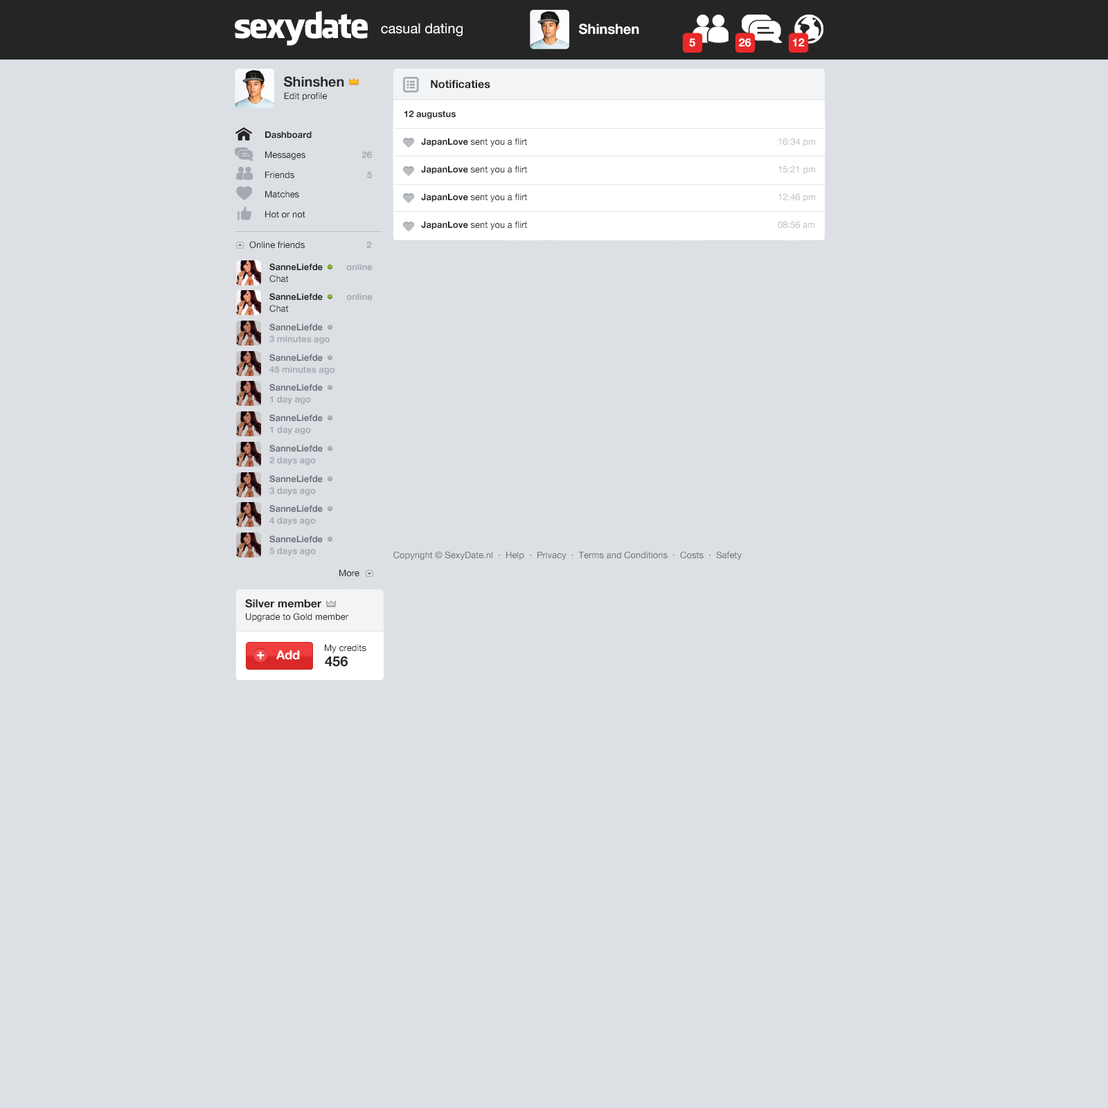
<style>
.page{position:relative;width:1108px;height:1108px;background:#dcdfe3}
.page>*{position:absolute;margin:0}
.t1{font:34.6px "FacebookLetterFaces";letter-spacing:-0.05em;color:#ffffff}
.t2{font:13.8px "HelveticaNeue";color:#ffffff}
.t3{font:13.8px "HelveticaNeue-Bold";color:#ffffff}
.t4{font:11.1px "HelveticaNeue-Bold";color:#ffffff}
.t5{font:13.8px "HelveticaNeue-Bold";color:#252525}
.t6{font:11.1px "HelveticaNeue-Bold";color:#252525}
.t7{font:9px "HelveticaNeue";color:#252525}
.t8{font:9px/13.8px "HelveticaNeue-Bold";color:#252525}
.t9{font:9px/13.8px "HelveticaNeue";color:#252525}
.t10{font:9px/13.8px "HelveticaNeue";color:#bbbec1}
.t11{font:9px/20px "HelveticaNeue";color:#252525}
.t12{font:9px/20px "HelveticaNeue-Bold";color:#252525}
.t13{font:9px/20px "HelveticaNeue-Bold";color:#a5aab2}
.t14{font:9px "HelveticaNeue-Bold";color:#a5aab2}
.t15{font:9px/11.8px "HelveticaNeue-Bold";color:#252525}
.t16{font:9px/11.8px "HelveticaNeue-Bold";color:#a5aab2}
.t17{font:9px/11.8px "HelveticaNeue";color:#252525}
.t18{font:9px/11.8px "HelveticaNeue-Bold";color:#6d727b}
.t19{font:9px "HelveticaNeue";color:#707070}
.t20{font:13.2px "HelveticaNeue-Bold";color:#ffffff;font-weight:bold}
.t21{font:12.5px "HelveticaNeue-Bold";color:#ffffff}
</style>
<div class="page">
<p class="t1" style="left:235px;top:11px;width:133px;height:35px">sexydate</p>
<p class="t2" style="left:381px;top:23px;width:81px;height:14px">casual dating</p>
<p class="t3" style="left:579px;top:24px;width:60px;height:11px">Shinshen</p>
<p class="t4" style="left:689px;top:38px;width:6px;height:9px">5</p>
<p class="t4" style="left:739px;top:38px;width:12px;height:9px">26</p>
<p class="t4" style="left:793px;top:38px;width:11px;height:8px">12</p>
<p class="t5" style="left:284px;top:76px;width:60px;height:11px">Shinshen</p>
<p class="t6" style="left:431px;top:80px;width:59px;height:9px">Notificaties</p>
<p class="t7" style="left:284px;top:92px;width:43px;height:9px">Edit profile</p>
<p class="t8" style="left:404px;top:110px;width:411px;height:120px">12 augustus<br><br>       JapanLove<span class="t9"> sent you a flirt                    </span><span class="t10">16:34 pm<br><br> </span>      JapanLove<span class="t9"> sent you a flirt                    </span><span class="t10">15:21 pm<br><br> </span>      JapanLove<span class="t9"> sent you a flirt                    </span><span class="t10">12:46 pm<br><br> </span>      JapanLove<span class="t9"> sent you a flirt                    </span><span class="t10">08:56 am</span></p>
<p class="t11" style="left:265px;top:131px;width:47px;height:87px"><span class="t12">Dashboard<br></span>Messages<br>Friends<br>Matches<br>Hot or not</p>
<p class="t13" style="left:362px;top:151px;width:10px;height:28px;text-align:right">26<br>5</p>
<p class="t7" style="left:249px;top:241px;width:123px;height:8px">Online friends      <span class="t14">2</span></p>
<p class="t15" style="left:269px;top:263px;width:103px;height:19px">SanneLiefde          <span class="t16">online<br></span><span class="t17">Chat</span></p>
<p class="t15" style="left:269px;top:293px;width:103px;height:19px">SanneLiefde          <span class="t16">online<br></span><span class="t17">Chat</span></p>
<p class="t16" style="left:269px;top:323px;width:61px;height:21px"><span class="t18">SanneLiefde<br></span>3 minutes ago</p>
<p class="t16" style="left:269px;top:354px;width:66px;height:21px"><span class="t18">SanneLiefde<br></span>45 minutes ago</p>
<p class="t18" style="left:269px;top:384px;width:54px;height:20px">SanneLiefde<br><span class="t16">1 day ago</span></p>
<p class="t18" style="left:269px;top:414px;width:54px;height:21px">SanneLiefde<br><span class="t16">1 day ago</span></p>
<p class="t18" style="left:269px;top:444px;width:54px;height:21px">SanneLiefde<br><span class="t16">2 days ago</span></p>
<p class="t18" style="left:269px;top:475px;width:54px;height:21px">SanneLiefde<br><span class="t16">3 days ago</span></p>
<p class="t18" style="left:269px;top:505px;width:54px;height:20px">SanneLiefde<br><span class="t16">4 days ago</span></p>
<p class="t18" style="left:269px;top:535px;width:54px;height:21px">SanneLiefde<br><span class="t16">5 days ago</span></p>
<p class="t19" style="left:393px;top:551px;width:348px;height:9px">Copyright © SexyDate.nl  ·  Help  ·  Privacy  ·  Terms and Conditions  ·  Costs  ·  Safety</p>
<p class="t7" style="left:339px;top:569px;width:20px;height:8px">More</p>
<p class="t6" style="left:245px;top:599px;width:76px;height:9px">Silver member</p>
<p class="t7" style="left:246px;top:613px;width:102px;height:9px">Upgrade to Gold member</p>
<p class="t20" style="left:257px;top:651px;width:7px;height:8px">+</p>
<p class="t21" style="left:276px;top:650px;width:24px;height:10px">Add</p>
<p class="t7" style="left:325px;top:644px;width:41px;height:9px">My credits</p>
<p class="t5" style="left:325px;top:656px;width:23px;height:11px">456</p>
</div>
